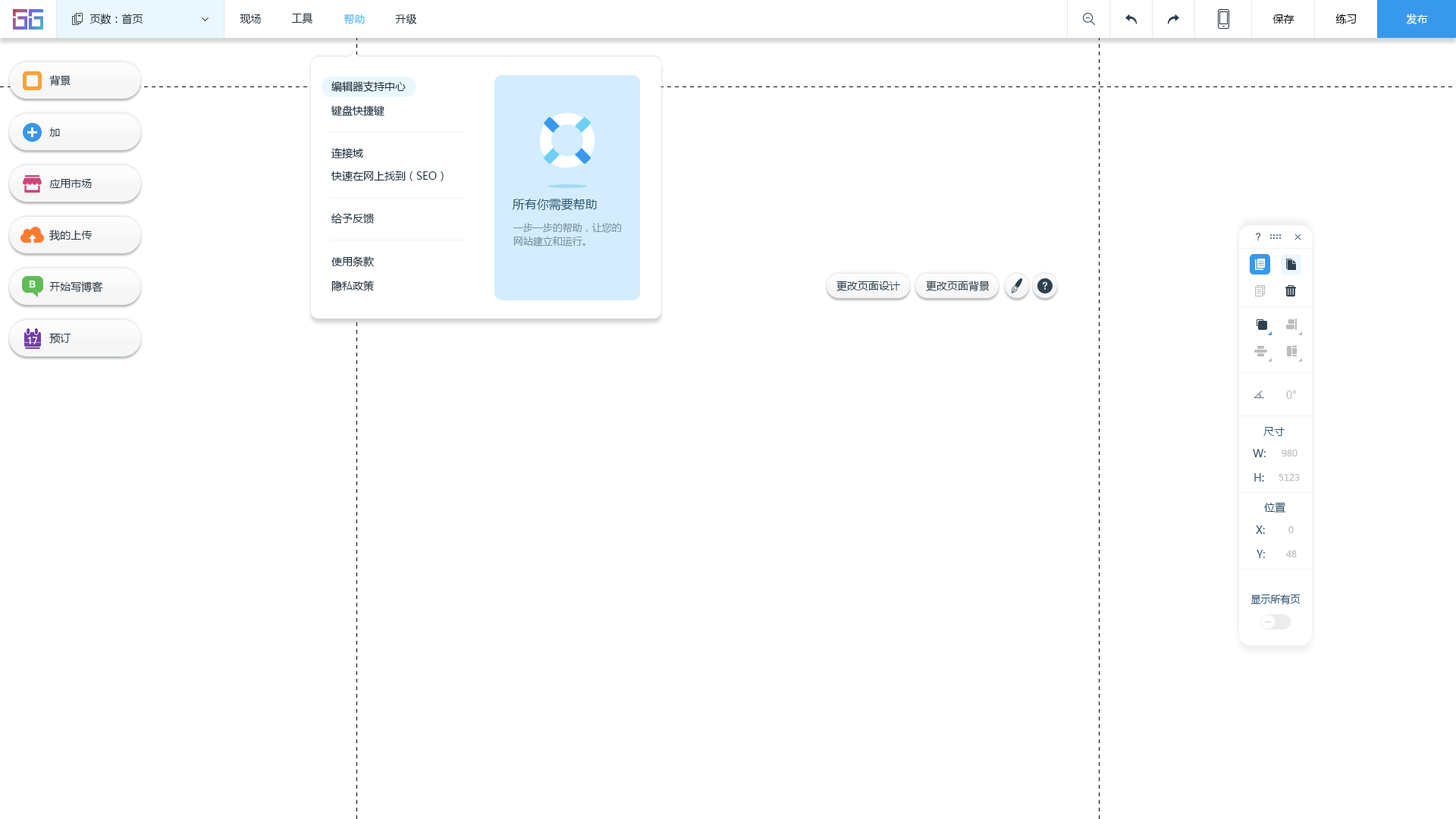
<style>
.page{position:relative;width:1456px;height:819px;background:#ffffff}
.page>*{position:absolute;margin:0}
.t1{font:10.6px "MicrosoftYaHei";color:#20303c}
.t2{font:10.6px "MicrosoftYaHei";color:#4eb7f5}
.t3{font:10.6px "MicrosoftYaHei";color:#000000}
.t4{font:10.6px "MicrosoftYaHei";color:#ffffff}
.t5{font:10.6px "MicrosoftYaHei";color:#283a48}
.t6{font:10.6px "MicrosoftYaHei";color:#162d3d}
.t7{font:12.1px "MicrosoftYaHei";color:#2b5672}
.t8{font:9.9px/13.6px "MicrosoftYaHei";color:#7a92a5}
.t9{font:10.6px "MicrosoftYaHei";color:#2d4150}
.t10{font:10.6px "MicrosoftYaHei";color:#bcbcbc}
.t11{font:10.6px "MicrosoftYaHei";color:#2b5672}
.t12{font:9.1px "MicrosoftYaHei";color:#bcbcbc}
.t13{font:9.9px "MicrosoftYaHei";color:#2b5672}
</style>
<div class="page">
<p class="t1" style="left:89px;top:14px;width:54px;height:11px">页数：首页</p>
<p class="t1" style="left:240px;top:14px;width:21px;height:10px">现场</p>
<p class="t1" style="left:291px;top:13px;width:22px;height:11px">工具</p>
<p class="t2" style="left:344px;top:14px;width:21px;height:11px">帮助</p>
<p class="t1" style="left:395px;top:14px;width:22px;height:10px">升级</p>
<p class="t3" style="left:1272px;top:14px;width:22px;height:10px">保存</p>
<p class="t3" style="left:1335px;top:14px;width:22px;height:10px">练习</p>
<p class="t4" style="left:1406px;top:14px;width:22px;height:10px">发布</p>
<p class="t5" style="left:49px;top:75px;width:22px;height:11px">背景</p>
<p class="t6" style="left:331px;top:81px;width:75px;height:11px">编辑器支持中心</p>
<p class="t6" style="left:331px;top:105px;width:53px;height:11px">键盘快捷键</p>
<p class="t5" style="left:49px;top:127px;width:11px;height:9px">加</p>
<p class="t6" style="left:331px;top:148px;width:32px;height:10px">连接域</p>
<p class="t6" style="left:331px;top:171px;width:113px;height:10px">快速在网上找到（SEO）</p>
<p class="t5" style="left:49px;top:179px;width:43px;height:9px">应用市场</p>
<p class="t7" style="left:512px;top:199px;width:85px;height:12px">所有你需要帮助</p>
<p class="t6" style="left:331px;top:213px;width:43px;height:11px">给予反馈</p>
<p class="t5" style="left:49px;top:230px;width:44px;height:11px">我的上传</p>
<p class="t8" style="left:513px;top:222px;width:108px;height:24px">一步一步的帮助，让您的<br>网站建立和运行。</p>
<p class="t6" style="left:331px;top:256px;width:43px;height:11px">使用条款</p>
<p class="t5" style="left:49px;top:281px;width:54px;height:12px">开始写博客</p>
<p class="t6" style="left:331px;top:281px;width:43px;height:11px">隐私政策</p>
<p class="t9" style="left:836px;top:281px;width:64px;height:10px">更改页面设计</p>
<p class="t9" style="left:926px;top:281px;width:64px;height:10px">更改页面背景</p>
<p class="t5" style="left:49px;top:333px;width:22px;height:11px">预订</p>
<p class="t10" style="left:1286px;top:391px;width:11px;height:8px">0°</p>
<p class="t11" style="left:1263px;top:427px;width:22px;height:9px">尺寸</p>
<p class="t11" style="left:1253px;top:449px;width:13px;height:8px">W:</p>
<p class="t12" style="left:1282px;top:450px;width:15px;height:7px">980</p>
<p class="t11" style="left:1254px;top:473px;width:10px;height:9px">H:</p>
<p class="t12" style="left:1279px;top:474px;width:21px;height:7px">5123</p>
<p class="t11" style="left:1264px;top:502px;width:22px;height:11px">位置</p>
<p class="t11" style="left:1256px;top:526px;width:9px;height:8px">X:</p>
<p class="t12" style="left:1288px;top:526px;width:6px;height:7px">0</p>
<p class="t11" style="left:1257px;top:550px;width:8px;height:8px">Y:</p>
<p class="t12" style="left:1286px;top:551px;width:11px;height:6px">48</p>
<p class="t13" style="left:1250px;top:594px;width:51px;height:10px">显示所有页</p>
</div>
